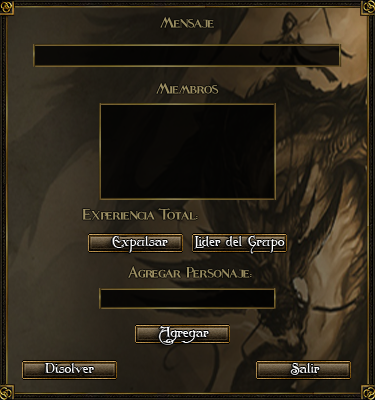
<style>
.page{position:relative;width:375px;height:400px}
.page>*{position:absolute;margin:0}
.t1{font:28.9px "Fleet-Street";color:#978b5f;scale:0.94 1}
.t2{font:28.9px "Fleet-Street";color:#9b8e61;scale:0.94 1}
.t3{font:28.9px "Fleet-Street";color:#9e9063;scale:0.94 1}
.t4{font:14px "Folkard";color:#ffffff}
.t5{font:28.9px "Fleet-Street";color:#998c60;scale:0.94 1}
.t6{font:14px "Folkard"}
</style>
<div class="page">
<p class="t1" style="left:160px;top:16px;width:54px;height:12px">Mensaje</p>
<p class="t2" style="left:156px;top:82px;width:63px;height:12px">Miembros</p>
<p class="t3" style="left:82px;top:208px;width:116px;height:12px">Experiencia Total:</p>
<p class="t4" style="left:111px;top:236px;width:57px;height:17px">Expulsar</p>
<p class="t4" style="left:194px;top:235px;width:91px;height:19px">Lider del Grupo</p>
<p class="t5" style="left:128px;top:265px;width:124px;height:13px">Agregar Personaje:</p>
<p class="t6" style="left:158px;top:326px;width:51px;height:19px">Agregar</p>
<p class="t6" style="left:44px;top:363px;width:50px;height:10px">Disolver</p>
<p class="t6" style="left:290px;top:363px;width:30px;height:12px">Salir</p>
</div>
